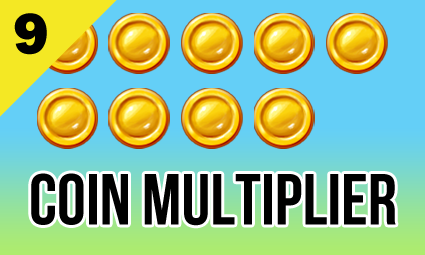
<style>
.page{position:relative;width:425px;height:255px;background:#64cff7}
.page>*{position:absolute;margin:0}
.t1{font:60px "FranklinGothic-Heavy";color:#000000}
.t2{font:72px "BebasNeueBold";color:#000000}
</style>
<div class="page">
<p class="t1" style="left:14px;top:13px;width:33px;height:42px">9</p>
<p class="t2" style="left:31px;top:173px;width:365px;height:53px">COIN MULTIPLIER</p>
</div>
